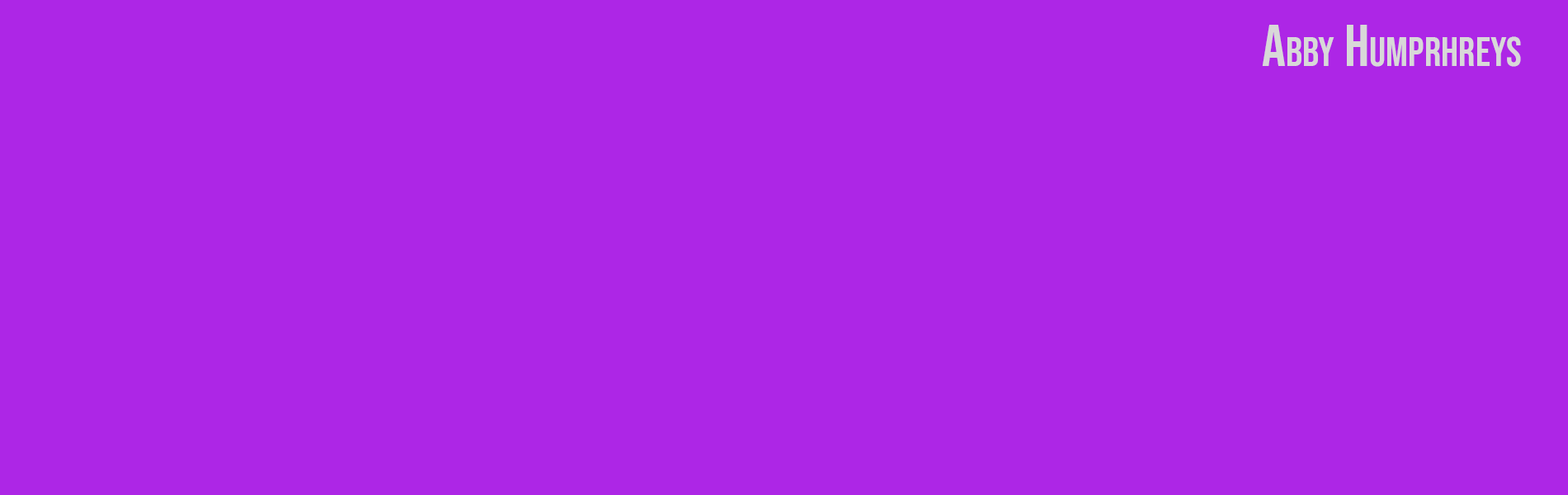
<style>
.page{position:relative;width:1568px;height:495px;background:#ad26e6}
.page>*{position:absolute;margin:0}
.t1{font:59.4px "BebasNeue-Regular";color:#d8d8d8;font-variant:small-caps}
</style>
<div class="page">
<p class="t1" style="left:1262px;top:25px;width:259px;height:42px">Abby Humprhreys</p>
</div>
